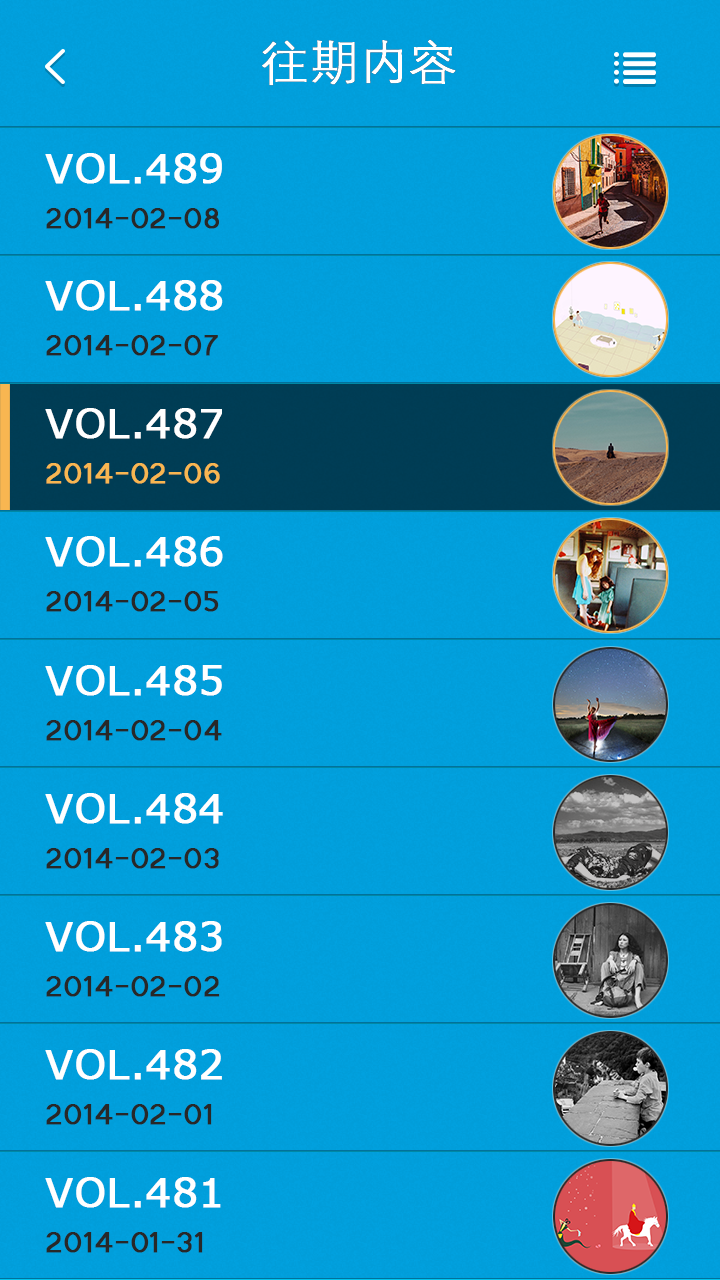
<style>
.page{position:relative;width:720px;height:1280px}
.page>*{position:absolute;margin:0}
.t1{font:48px "JXiHei";color:#ffffff;font-weight:bold}
.t2{font:40px "Verdana";color:#ffffff;font-weight:bold}
.t3{font:36px "Tunga";color:#282828;font-weight:bold}
.t4{font:36px "Tunga";color:#f8b651;font-weight:bold}
</style>
<div class="page">
<p class="t1" style="left:262px;top:39px;width:194px;height:47px">往期内容</p>
<p class="t2" style="left:45px;top:153px;width:177px;height:31px">VOL.489</p>
<p class="t3" style="left:46px;top:208px;width:173px;height:21px">2014-02-08</p>
<p class="t2" style="left:45px;top:280px;width:178px;height:31px">VOL.488</p>
<p class="t3" style="left:46px;top:335px;width:172px;height:21px">2014-02-07</p>
<p class="t2" style="left:45px;top:408px;width:177px;height:31px">VOL.487</p>
<p class="t4" style="left:46px;top:463px;width:174px;height:21px">2014-02-06</p>
<p class="t2" style="left:45px;top:536px;width:178px;height:31px">VOL.486</p>
<p class="t3" style="left:46px;top:591px;width:173px;height:21px">2014-02-05</p>
<p class="t2" style="left:45px;top:665px;width:177px;height:31px">VOL.485</p>
<p class="t3" style="left:46px;top:720px;width:176px;height:21px">2014-02-04</p>
<p class="t2" style="left:45px;top:793px;width:178px;height:31px">VOL.484</p>
<p class="t3" style="left:46px;top:848px;width:173px;height:21px">2014-02-03</p>
<p class="t2" style="left:45px;top:921px;width:177px;height:31px">VOL.483</p>
<p class="t3" style="left:46px;top:976px;width:174px;height:21px">2014-02-02</p>
<p class="t2" style="left:45px;top:1049px;width:177px;height:31px">VOL.482</p>
<p class="t3" style="left:46px;top:1104px;width:166px;height:21px">2014-02-01</p>
<p class="t2" style="left:45px;top:1177px;width:176px;height:31px">VOL.481</p>
<p class="t3" style="left:46px;top:1232px;width:157px;height:21px">2014-01-31</p>
</div>
